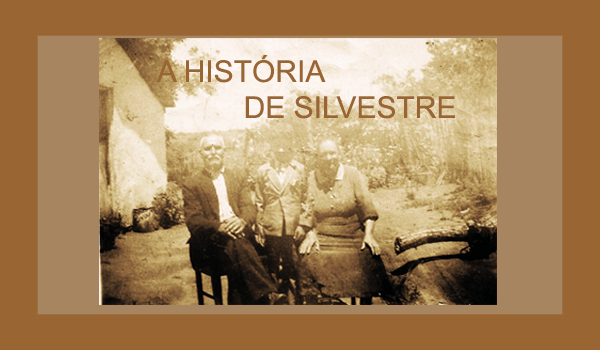
<style>
.page{position:relative;width:600px;height:350px;background:#996633}
.page>*{position:absolute;margin:0}
.t1{font:30px "ArialMT";color:#996633}
</style>
<div class="page">
<p class="t1" style="left:156px;top:55px;width:299px;height:64px">A HISTÓRIA<br>             DE SILVESTRE</p>
</div>
